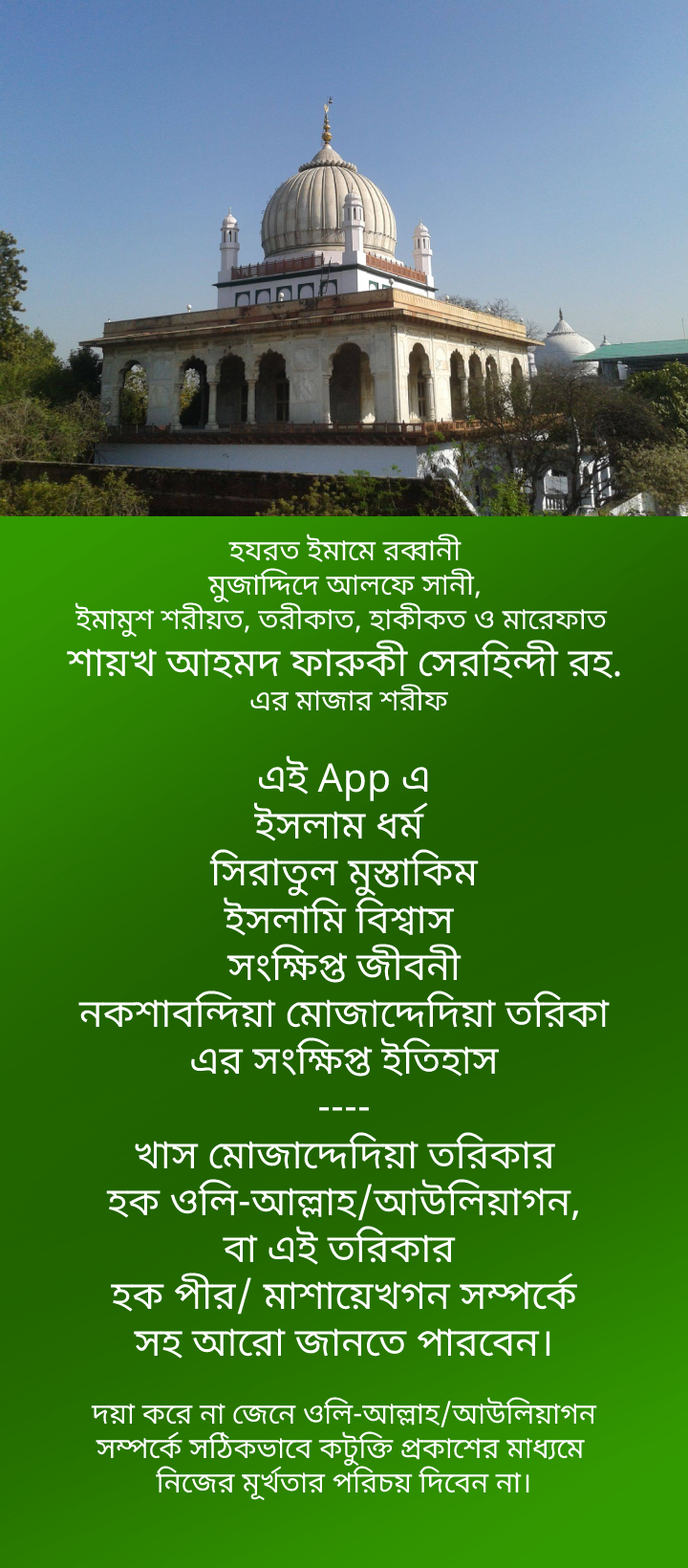
<style>
.page{position:relative;width:688px;height:1568px}
.page>*{position:absolute;margin:0}
.t1{font:28.7px "NotoSansBengali-Regular";color:#ffffff}
.t2{font:39.2px "NotoSansBengali-Regular";color:#ffffff}
</style>
<div class="page">
<p class="t1" style="left:67px;top:534px;width:554px;height:177px;text-align:center">হযরত ইমামে রব্বানী<br>মুজাদ্দিদে আলফে সানী,<br>ইমামুশ শরীয়ত, তরীকাত, হাকীকত ও মারেফাত <br><span class="t2">শায়খ আহমদ ফারুকী সেরহিন্দী রহ.<br></span> এর মাজার শরীফ</p>
<p class="t2" style="left:78px;top:755px;width:532px;height:604px;text-align:center">এই App এ<br>ইসলাম ধর্ম <br>সিরাতুল মুস্তাকিম<br>ইসলামি বিশ্বাস <br>সংক্ষিপ্ত জীবনী<br>নকশাবন্দিয়া মোজাদ্দেদিয়া তরিকা<br>এর সংক্ষিপ্ত ইতিহাস<br>----<br>খাস মোজাদ্দেদিয়া তরিকার<br>হক ওলি-আল্লাহ/আউলিয়াগন,<br>বা এই তরিকার <br>হক পীর/ মাশায়েখগন সম্পর্কে<br>সহ আরো জানতে পারবেন।</p>
<p class="t1" style="left:91px;top:1397px;width:507px;height:104px;text-align:center">দয়া করে না জেনে ওলি-আল্লাহ/আউলিয়াগন<br>সম্পর্কে সঠিকভাবে কটুক্তি প্রকাশের মাধ্যমে <br>নিজের মূর্খতার পরিচয় দিবেন না।</p>
</div>
